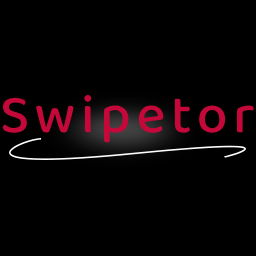
<style>
.page{position:relative;width:256px;height:256px;background:#000000}
.page>*{position:absolute;margin:0}
.t1{font:55.1px "Baloo2-Medium";letter-spacing:0.099em;color:#c5083a}
</style>
<div class="page">
<p class="t1" style="left:2px;top:95px;width:252px;height:48px">Swipetor</p>
</div>
